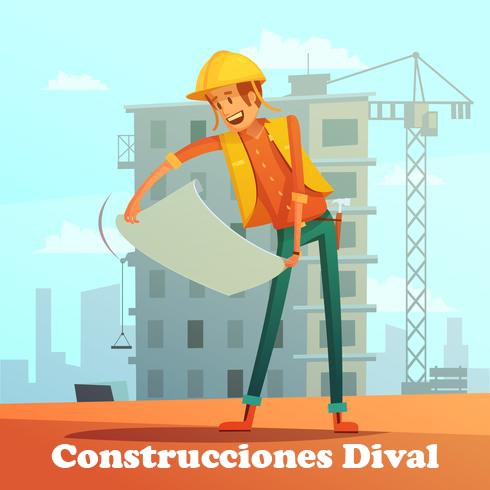
<style>
.page{position:relative;width:490px;height:490px}
.page>*{position:absolute;margin:0}
.t1{font:36px "CooperBlack";color:#ffffff}
</style>
<div class="page">
<p class="t1" style="left:51px;top:444px;width:388px;height:24px">Construcciones Dival</p>
</div>
